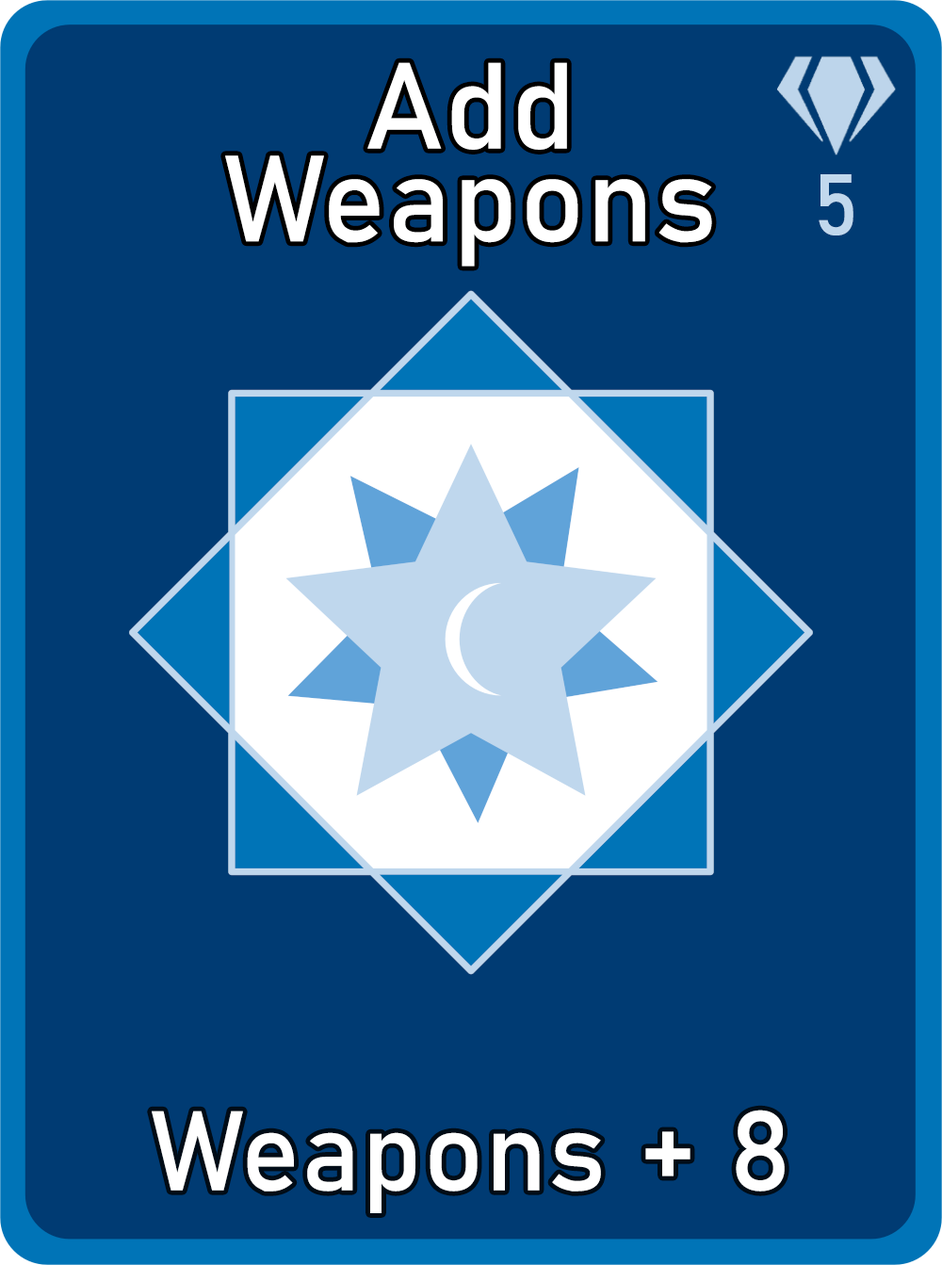
<style>
.page{position:relative;width:942px;height:1265px;background:#003b73}
.page>*{position:absolute;margin:0}
.t1{font:120.6px/92.7px "Bahnschrift";letter-spacing:0.01em;color:#ffffff}
.t2{font:85px "Bahnschrift";letter-spacing:0.01em;color:#c1d8ed}
.t3{font:111.3px "Bahnschrift";letter-spacing:0.01em;color:#ffffff}
</style>
<div class="page">
<p class="t1" style="left:225px;top:62px;width:487px;height:205px;text-align:center">Add<br>Weapons</p>
<p class="t2" style="left:819px;top:174px;width:35px;height:62px">5</p>
<p class="t3" style="left:152px;top:1110px;width:633px;height:104px">Weapons + 8</p>
</div>
